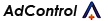
<style>
.page{position:relative;width:108px;height:21px;background:#ffffff}
.page>*{position:absolute;margin:0}
.t1{font:15px "CenturyGothic-BoldItalic";color:#070707}
</style>
<div class="page">
<p class="t1" style="left:3px;top:5px;width:75px;height:11px">AdControl</p>
</div>
